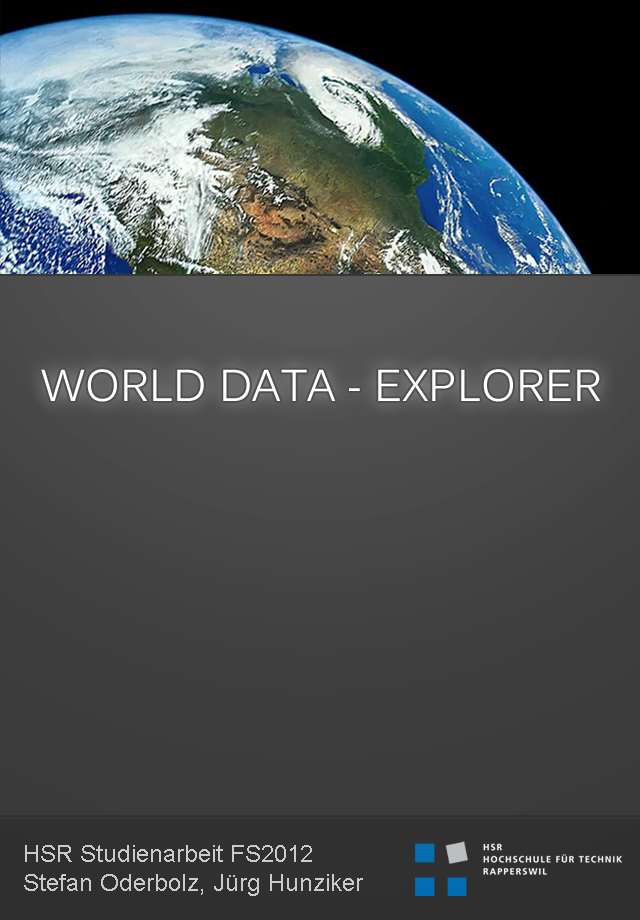
<style>
.page{position:relative;width:640px;height:920px}
.page>*{position:absolute;margin:0}
.t1{font:44px "Kalinga";color:#ffffff}
.t2{font:24px "ArialMT";color:#cacaca}
</style>
<div class="page">
<p class="t1" style="left:41px;top:369px;width:560px;height:33px">WORLD DATA - EXPLORER</p>
<p class="t2" style="left:24px;top:845px;width:339px;height:51px">HSR Studienarbeit FS2012<br>Stefan Oderbolz, Jürg Hunziker</p>
</div>
